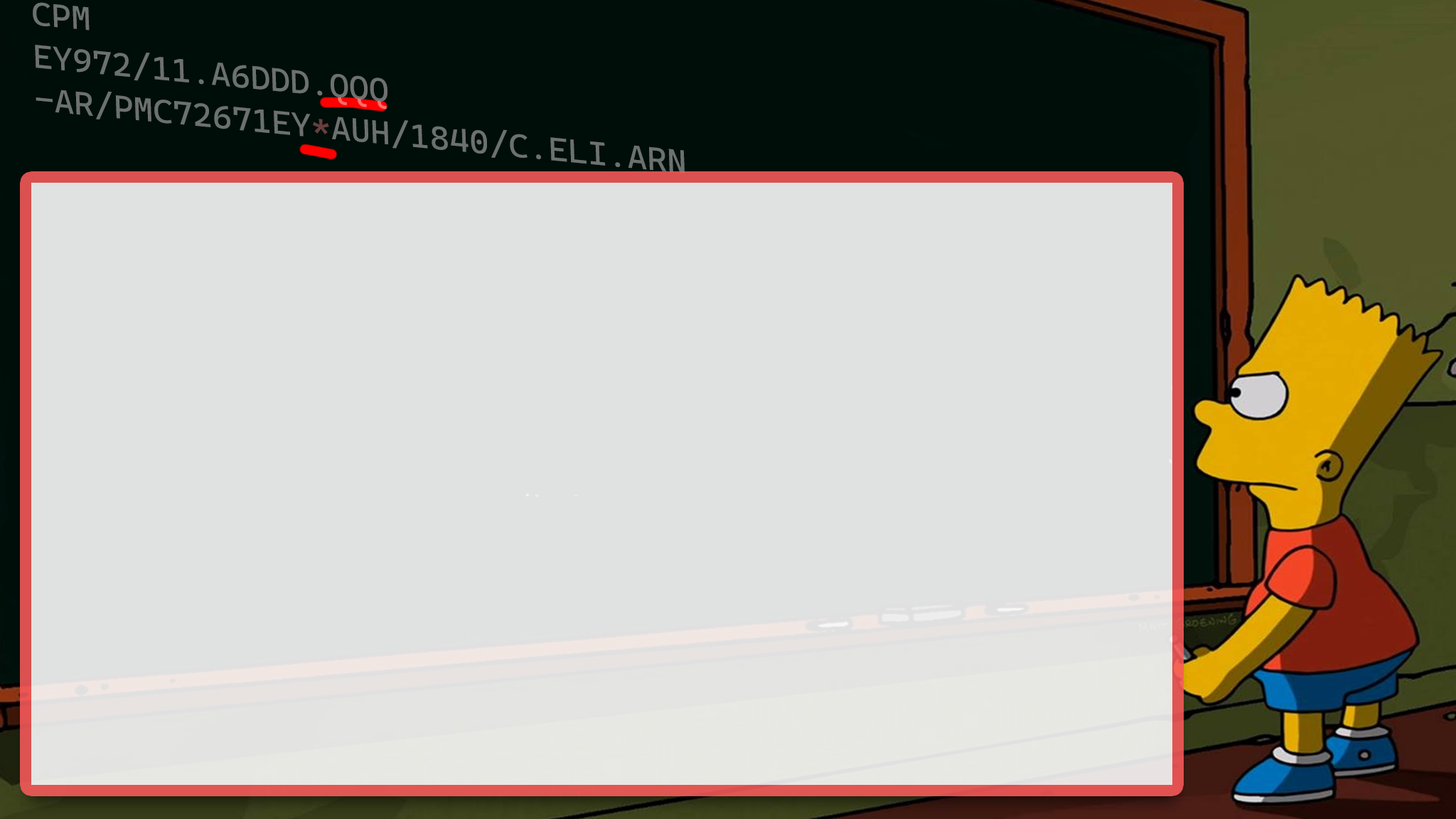
<style>
.page{position:relative;width:1456px;height:819px;background:#e0e2e1}
.page>*{position:absolute;margin:0}
.t1{font:32.9px/42.8px "CascadiaCode-Regular";color:#6c716f}
</style>
<div class="page">
<p class="t1" style="left:33px;top:2px;width:652px;height:171px;rotate:6deg">CPM<br>EY972/11.A6DDD.QQQ<br>-AR/PMC72671EY*AUH/1840/C.ELI.ARN</p>
</div>
